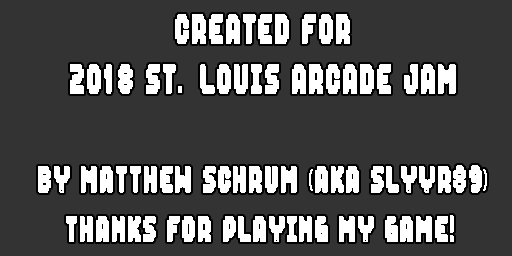
<style>
.page{position:relative;width:512px;height:256px;background:#333333}
.page>*{position:absolute;margin:0}
.t1{font:29.4px/50px "Spaceboy";color:#ffffff;font-weight:bold;scale:0.59 1}
.t2{font:26.2px/50px "Spaceboy";color:#ffffff;font-weight:bold;scale:0.59 1}
.t3{font:26.2px/50px "MyriadPro-Regular";color:#ffffff;font-weight:bold;scale:0.59 1}
</style>
<div class="page">
<p class="t1" style="left:38px;top:14px;width:449px;height:228px;text-align:center">Created for<br>2018 St. Louis Arcade Jam<br><span class="t2"><br>by Matthew Schrum </span><span class="t3">(</span><span class="t2">aka Slyvr89</span><span class="t3">)</span><span class="t2"><br>Thanks for playing my game!</span></p>
</div>
